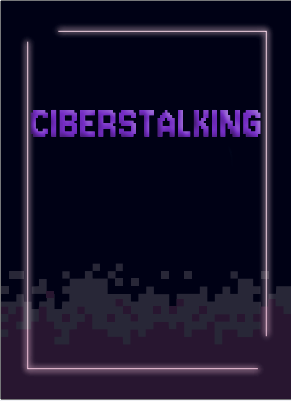
<style>
.page{position:relative;width:291px;height:401px;background:#000115}
.page>*{position:absolute;margin:0}
.t1{font:50px "Jersey10-Regular";letter-spacing:0.025em;scale:0.9 1}
</style>
<div class="page">
<p class="t1" style="left:30px;top:109px;width:231px;height:28px">CIBERSTALKING</p>
</div>
